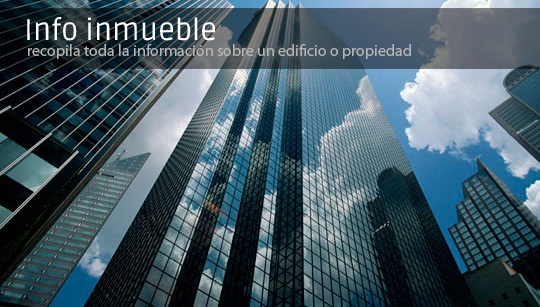
<style>
.page{position:relative;width:540px;height:307px}
.page>*{position:absolute;margin:0}
.t1{font:30px "Ruda";color:#ffffff}
.t2{font:16px "MyriadPro-Regular";color:#b5b5b5}
</style>
<div class="page">
<p class="t1" style="left:27px;top:17px;width:188px;height:24px">Info inmueble</p>
<p class="t2" style="left:28px;top:44px;width:383px;height:15px">recopila toda la información sobre un edificio o propiedad</p>
</div>
